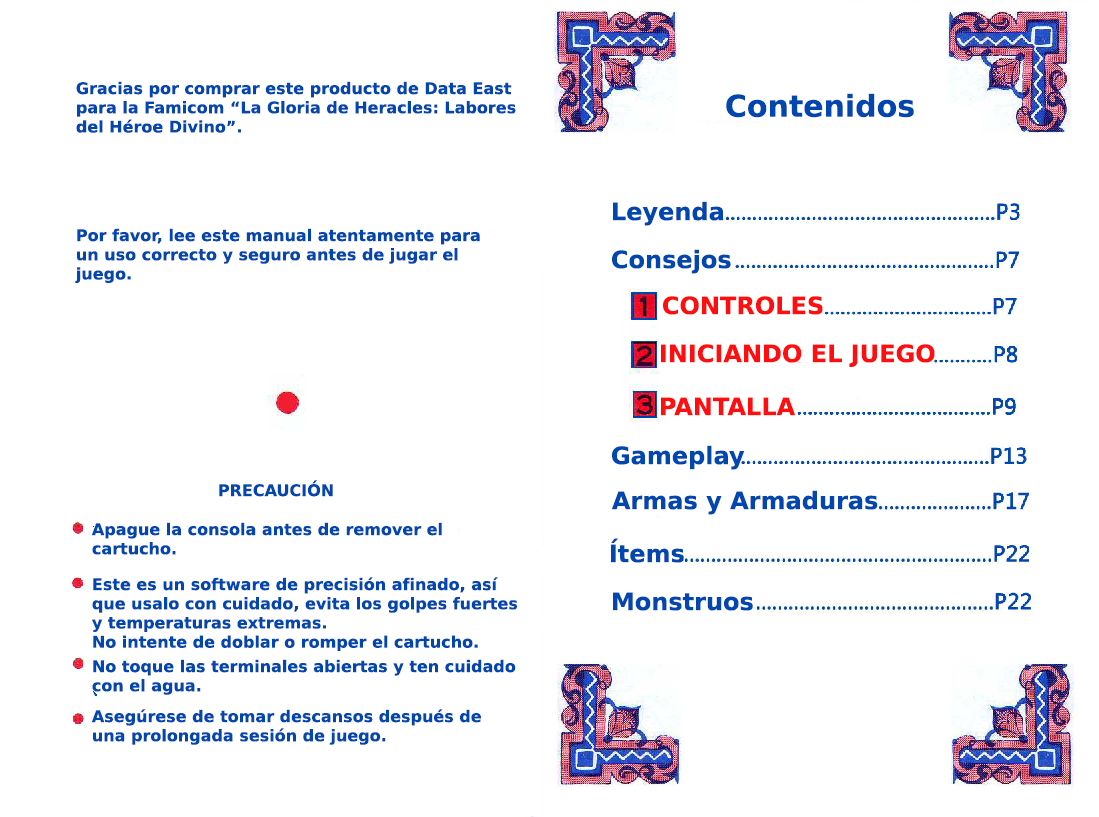
<style>
.page{position:relative;width:1099px;height:817px;background:#ffffff}
.page>*{position:absolute;margin:0}
.t1{font:16px "PrimaSansBT-Bold";color:#0247af}
.t2{font:30px "PrimaSansBT-Bold";color:#0247af}
.t3{font:24px "PrimaSansBT-Bold";color:#0247af}
.t4{font:24px "PrimaSansBT-Bold";color:#ff0e0f}
</style>
<div class="page">
<p class="t1" style="left:76px;top:81px;width:440px;height:52px">Gracias por comprar este producto de Data East <br>para la Famicom “La Gloria de Heracles: Labores <br>del Héroe Divino”.</p>
<p class="t2" style="left:726px;top:93px;width:188px;height:25px">Contenidos</p>
<p class="t3" style="left:613px;top:201px;width:110px;height:25px">Leyenda</p>
<p class="t1" style="left:75px;top:228px;width:405px;height:55px">Por favor, lee este manual atentamente para<br>un uso correcto y seguro antes de jugar el<br>juego.</p>
<p class="t3" style="left:612px;top:249px;width:119px;height:25px">Consejos</p>
<p class="t4" style="left:663px;top:296px;width:160px;height:19px">CONTROLES</p>
<p class="t4" style="left:661px;top:344px;width:274px;height:23px">INICIANDO EL JUEGO</p>
<p class="t4" style="left:661px;top:397px;width:135px;height:19px">PANTALLA</p>
<p class="t3" style="left:612px;top:445px;width:133px;height:25px">Gameplay</p>
<p class="t1" style="left:219px;top:480px;width:114px;height:17px">PRECAUCIÓN</p>
<p class="t3" style="left:612px;top:490px;width:266px;height:25px">Armas y Armaduras</p>
<p class="t1" style="left:91px;top:522px;width:351px;height:33px">Apague la consola antes de remover el<br>cartucho.</p>
<p class="t3" style="left:611px;top:538px;width:73px;height:25px">Ítems</p>
<p class="t1" style="left:92px;top:577px;width:426px;height:74px">Este es un software de precisión afinado, así<br>que usalo con cuidado, evita los golpes fuertes<br>y temperaturas extremas.<br>No intente de doblar o romper el cartucho.</p>
<p class="t3" style="left:613px;top:592px;width:140px;height:19px">Monstruos</p>
<p class="t1" style="left:92px;top:659px;width:424px;height:36px">No toque las terminales abiertas y ten cuidado<br>con el agua.</p>
<p class="t1" style="left:91px;top:709px;width:390px;height:36px">Asegúrese de tomar descansos después de <br>una prolongada sesión de juego.</p>
</div>
